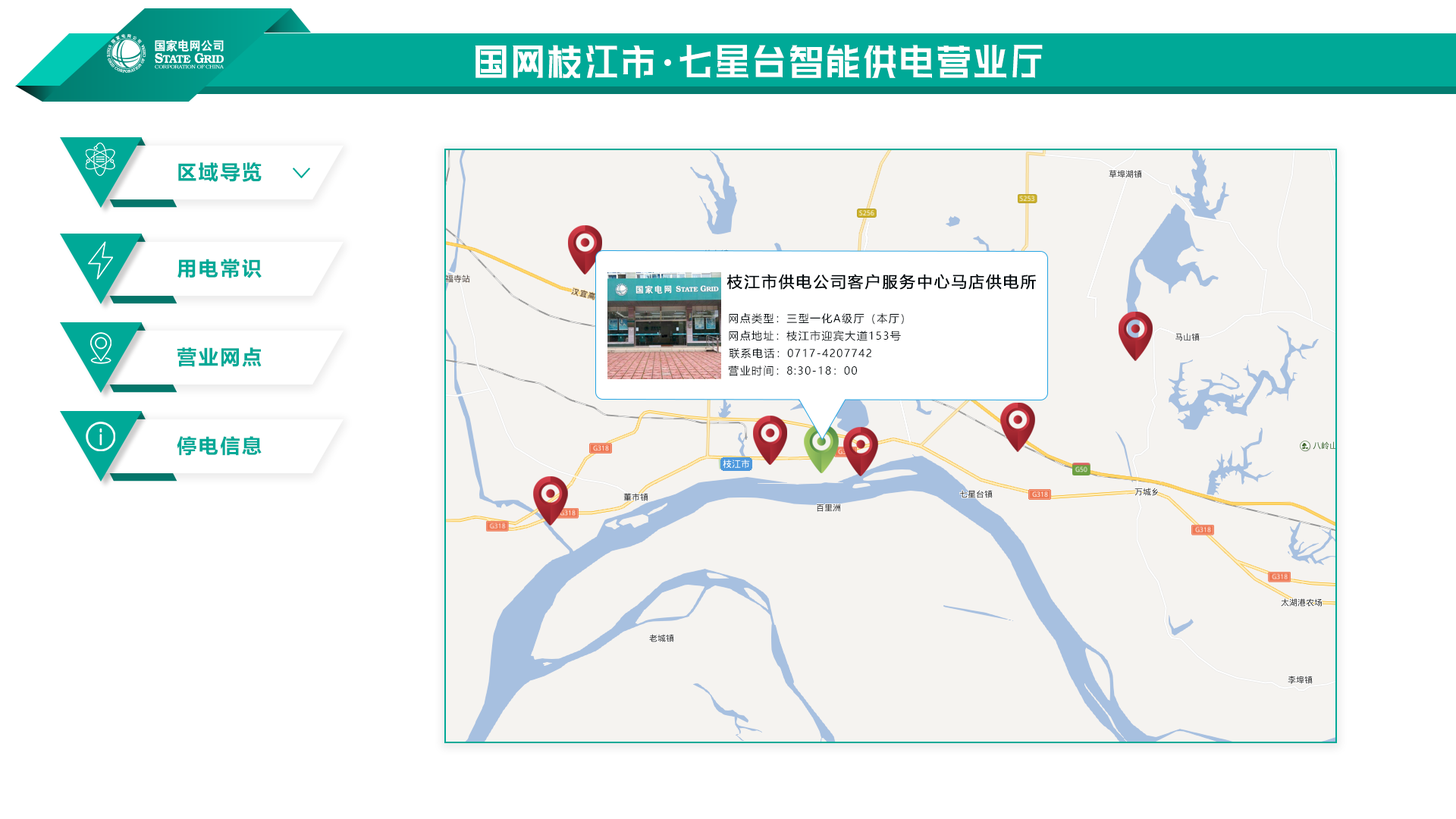
<style>
.page{position:relative;width:1456px;height:819px;background:#ffffff}
.page>*{position:absolute;margin:0}
.t1{font:54.7px "HuXiaoBoKuHei";letter-spacing:0.1em;color:#ffffff;scale:0.61 1}
.t2{font:19.7px "MicrosoftYaHei-Bold";letter-spacing:0.1em;color:#00a997}
.t3{font:15.3px "MicrosoftYaHei";letter-spacing:0.1em;color:#02090d;font-weight:bold}
.t4{font:10.6px "MicrosoftYaHei";letter-spacing:0.1em;color:#02090d}
</style>
<div class="page">
<p class="t1" style="left:475px;top:45px;width:568px;height:34px">国网枝江市 七星台智能供电营业厅</p>
<p class="t2" style="left:178px;top:162px;width:84px;height:20px">区域导览</p>
<p class="t2" style="left:177px;top:259px;width:85px;height:19px">用电常识</p>
<p class="t3" style="left:726px;top:274px;width:310px;height:16px">枝江市供电公司客户服务中心马店供电所</p>
<p class="t4" style="left:729px;top:313px;width:175px;height:12px">网点类型：三型一化A级厅（本厅）</p>
<p class="t4" style="left:729px;top:330px;width:172px;height:11px">网点地址：枝江市迎宾大道153号</p>
<p class="t2" style="left:177px;top:347px;width:85px;height:20px">营业网点</p>
<p class="t4" style="left:729px;top:348px;width:142px;height:11px">联系电话：0717-4207742</p>
<p class="t4" style="left:728px;top:366px;width:129px;height:10px">营业时间：8:30-18：00</p>
<p class="t2" style="left:177px;top:436px;width:85px;height:20px">停电信息</p>
</div>
